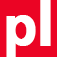
<style>
.page{position:relative;width:57px;height:57px;background:#eb0424}
.page>*{position:absolute;margin:0}
.t1{font:53.9px "Arial-BoldMT";letter-spacing:-0.025em;color:#ffffff;font-weight:bold}
.t2{font:61.6px "Arial-BoldMT";letter-spacing:-0.025em;color:#ffffff;font-weight:bold}
</style>
<div class="page">
<p class="t1" style="left:6px;top:0px;width:45px;height:57px">p<span class="t2">l</span></p>
</div>
